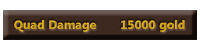
<style>
.page{position:relative;width:200px;height:50px;background:#ffffff}
.page>*{position:absolute;margin:0}
.t1{font:12px "LaoUI-Bold";color:#d3a61b;scale:1.03 1}
</style>
<div class="page">
<p class="t1" style="left:14px;top:19px;width:171px;height:13px">Quad Damage       15000 gold</p>
</div>
